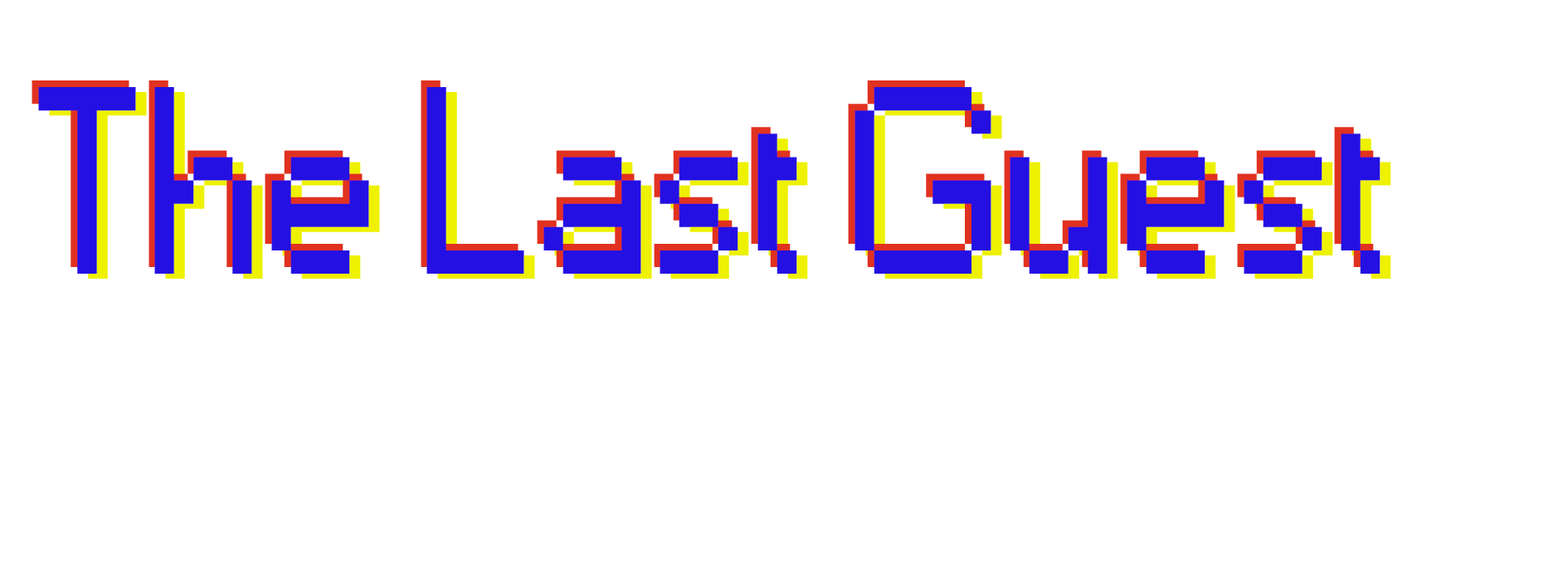
<style>
.page{position:relative;width:1568px;height:588px;background:#ffffff}
.page>*{position:absolute;margin:0}
.t1{font:248.9px "Small Fonts"}
.t2{font:248.9px "Small Fonts";color:#2410e2}
</style>
<div class="page">
<p class="t1" style="left:32px;top:80px;width:1342px;height:187px">The Last Guest</p>
<p class="t2" style="left:38px;top:87px;width:1343px;height:187px">The Last Guest</p>
<p class="t1" style="left:49px;top:92px;width:1342px;height:187px">The Last Guest</p>
</div>
